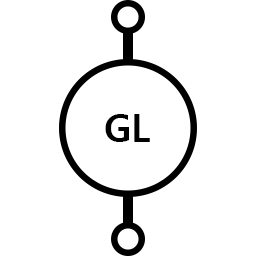
<style>
.page{position:relative;width:256px;height:256px;background:#ffffff}
.page>*{position:absolute;margin:0}
.t1{font:37.5px "MalgunGothicBold";color:#000000}
</style>
<div class="page">
<p class="t1" style="left:105px;top:114px;width:45px;height:28px">GL</p>
</div>
